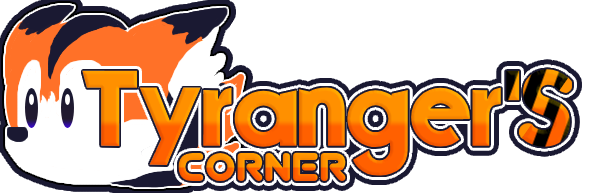
<style>
.page{position:relative;width:591px;height:193px;background:#ffffff}
.page>*{position:absolute;margin:0}
.t1{font:107px "Mouser"}
.t2{font:45px "Virgo01"}
</style>
<div class="page">
<p class="t1" style="left:82px;top:70px;width:419px;height:106px">Tyranger</p>
<p class="t1" style="left:506px;top:69px;width:64px;height:78px">'S</p>
<p class="t2" style="left:178px;top:152px;width:168px;height:30px">Corner</p>
</div>
